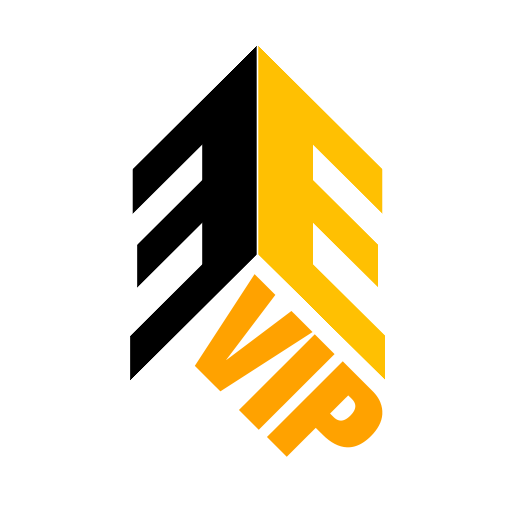
<style>
.page{position:relative;width:512px;height:512px;background:#ffffff}
.page>*{position:absolute;margin:0}
.t1{font:150px "HelveticaNeue-CondensedBlack";color:#ffa200}
</style>
<div class="page">
<p class="t1" style="left:194px;top:274px;width:189px;height:183px;rotate:45deg">VIP</p>
</div>
